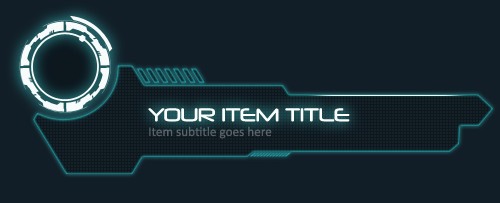
<style>
.page{position:relative;width:500px;height:203px;background:#111e27}
.page>*{position:absolute;margin:0}
.t1{font:17.7px "Neuropol-Regular";color:#ffffff}
.t2{font:13.3px "Calibri";color:#5c6368}
</style>
<div class="page">
<p class="t1" style="left:148px;top:108px;width:202px;height:14px">YOUR ITEM TITLE</p>
<p class="t2" style="left:149px;top:126px;width:123px;height:13px">Item subtitle goes here</p>
</div>
